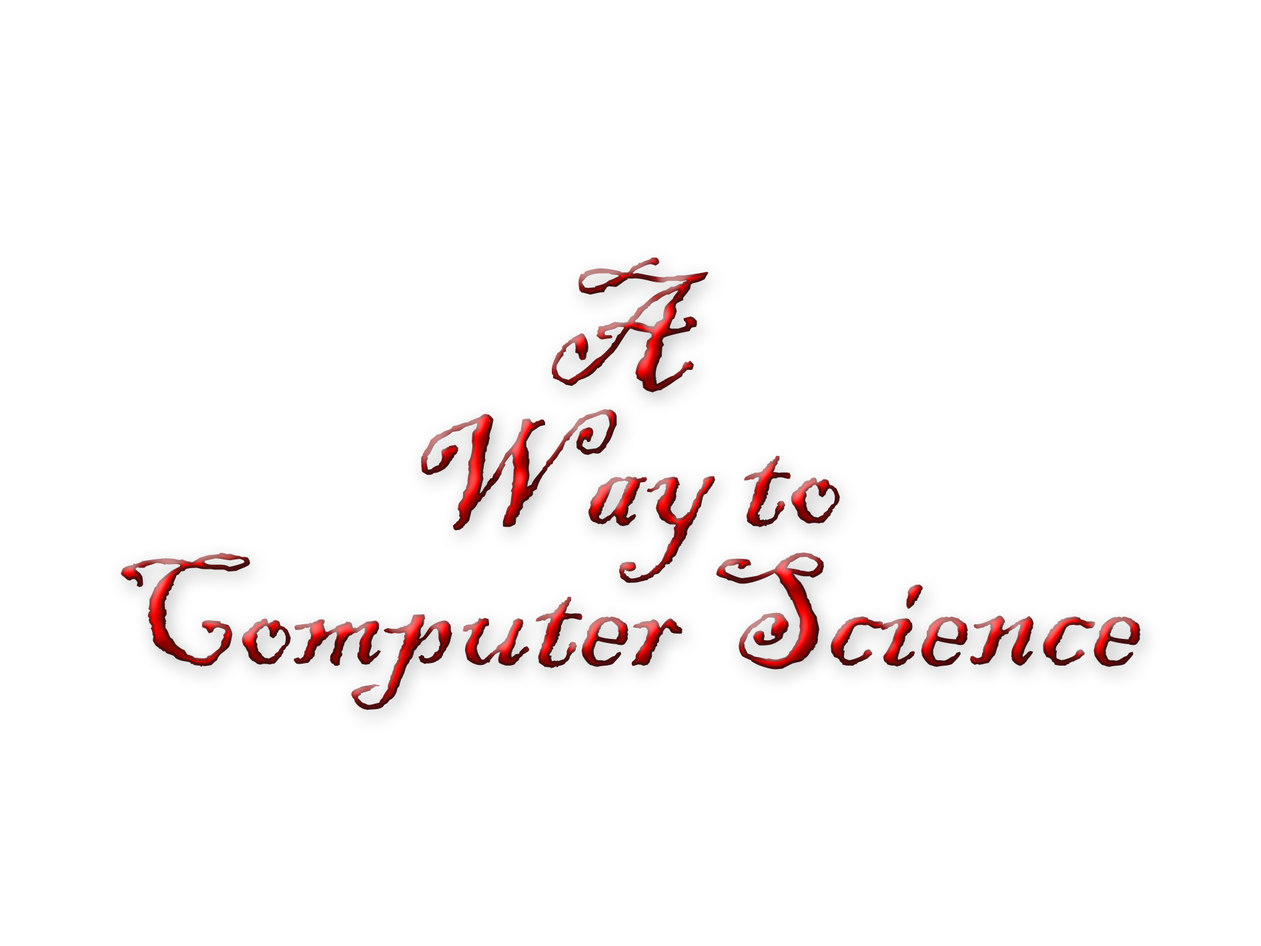
<style>
.page{position:relative;width:1261px;height:946px;background:#ffffff}
.page>*{position:absolute;margin:0}
.t1{font:166.8px "BlackadderITC-Regular"}
</style>
<div class="page">
<p class="t1" style="left:552px;top:257px;width:157px;height:135px">A</p>
<p class="t1" style="left:421px;top:409px;width:419px;height:174px">Way to</p>
<p class="t1" style="left:121px;top:552px;width:1020px;height:158px">Computer Science</p>
</div>
